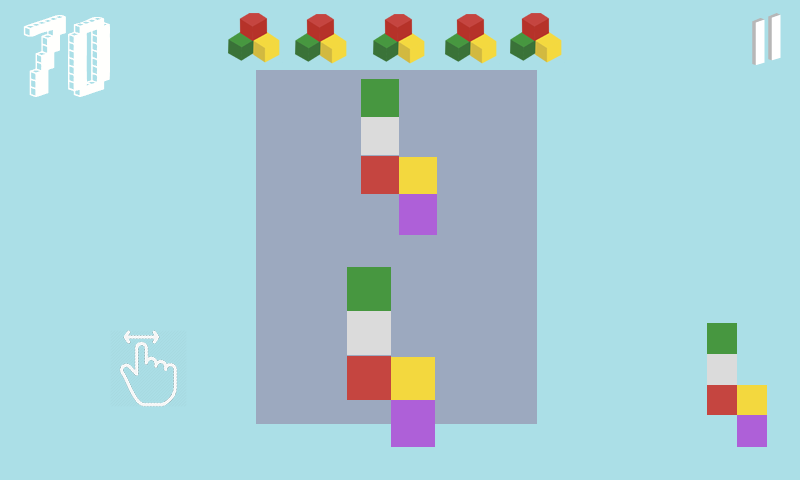
<style>
.page{position:relative;width:800px;height:480px;background:#abdfe7}
.page>*{position:absolute;margin:0}
.t1{font:89px "Blox-(BRK";color:#fffffd}
</style>
<div class="page">
<p class="t1" style="left:23px;top:15px;width:87px;height:82px">70</p>
</div>
